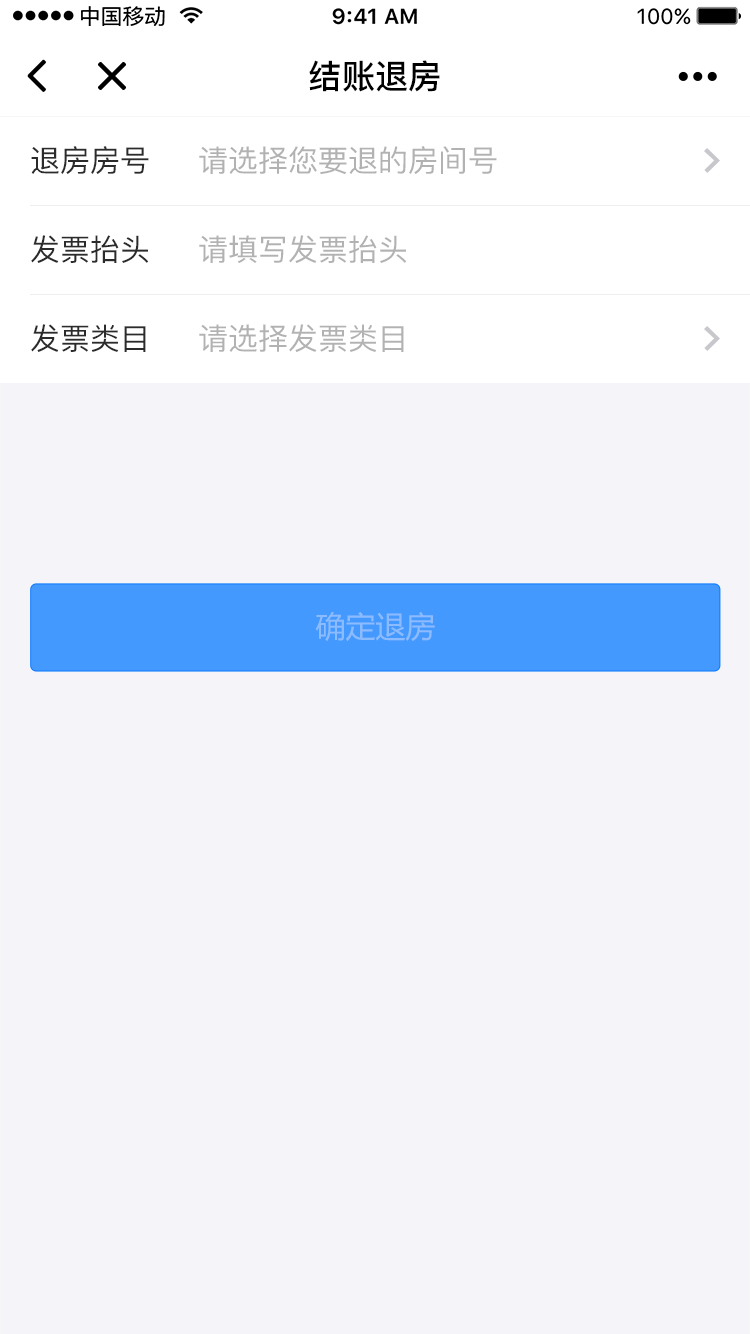
<style>
.page{position:relative;width:750px;height:1334px;background:#f5f5f9}
.page>*{position:absolute;margin:0}
.t1{font:33.2px "PingFang-SC-Bold";color:#000000}
.t2{font:30px "PingFang-SC-Medium";color:#2b2b2b}
.t3{font:30px "PingFang-SC-Medium";color:#b2b2b2}
.t4{font:30px "MicrosoftYaHei";color:#8dbbff}
</style>
<div class="page">
<p class="t1" style="left:309px;top:60px;width:131px;height:32px">结账退房</p>
<p class="t2" style="left:31px;top:146px;width:118px;height:28px">退房房号</p>
<p class="t3" style="left:199px;top:146px;width:298px;height:29px">请选择您要退的房间号</p>
<p class="t2" style="left:31px;top:235px;width:118px;height:28px">发票抬头</p>
<p class="t3" style="left:199px;top:235px;width:208px;height:28px">请填写发票抬头</p>
<p class="t2" style="left:31px;top:324px;width:115px;height:28px">发票类目</p>
<p class="t3" style="left:199px;top:324px;width:205px;height:28px">请选择发票类目</p>
<p class="t4" style="left:315px;top:612px;width:120px;height:29px">确定退房</p>
</div>
